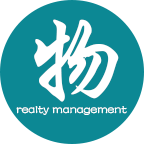
<style>
.page{position:relative;width:144px;height:144px;background:#0c8894}
.page>*{position:absolute;margin:0}
.t1{font:108.3px "STXingkai";color:#ffffff}
.t2{font:12.5px "FZSTK--GBK1-0";color:#ffffff}
</style>
<div class="page">
<p class="t1" style="left:34px;top:19px;width:85px;height:83px">物</p>
<p class="t2" style="left:16px;top:106px;width:111px;height:9px">realty management</p>
</div>
